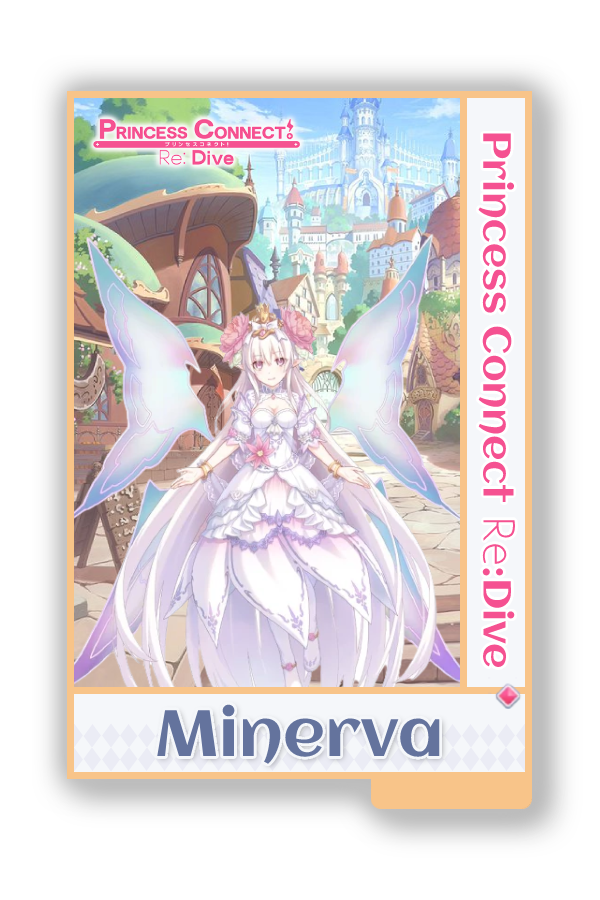
<style>
.page{position:relative;width:600px;height:900px;background:#ffffff}
.page>*{position:absolute;margin:0}
.t1{font:39px "Aclonica-Regular";color:#f55191}
.t2{font:39px "AaarghNormal";color:#f55191}
.t3{font:65px "Aclonica-Regular";color:#64739d}
</style>
<div class="page">
<p class="t1" style="left:478px;top:133px;width:38px;height:534px;rotate:90deg">Princess Connect <span class="t2">Re</span>:Dive</p>
<p class="t3" style="left:157px;top:704px;width:283px;height:60px">Minerva</p>
</div>
